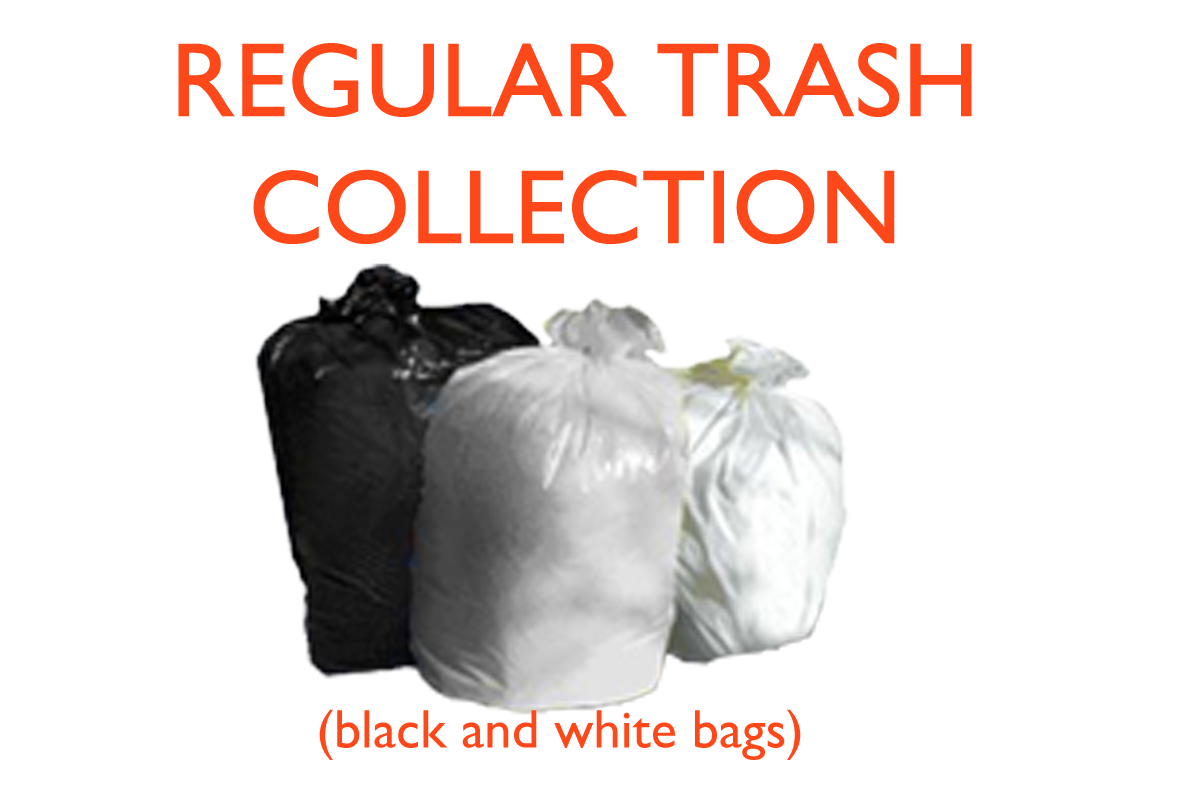
<style>
.page{position:relative;width:1181px;height:788px;background:#ffffff}
.page>*{position:absolute;margin:0}
.t1{font:105.9px "GillSans";color:#fe4819}
.t2{font:54.4px "GillSans";color:#fe4819}
</style>
<div class="page">
<p class="t1" style="left:178px;top:43px;width:794px;height:201px;text-align:center">REGULAR TRASH<br>COLLECTION</p>
<p class="t2" style="left:319px;top:709px;width:482px;height:51px">(black and white bags)</p>
</div>
